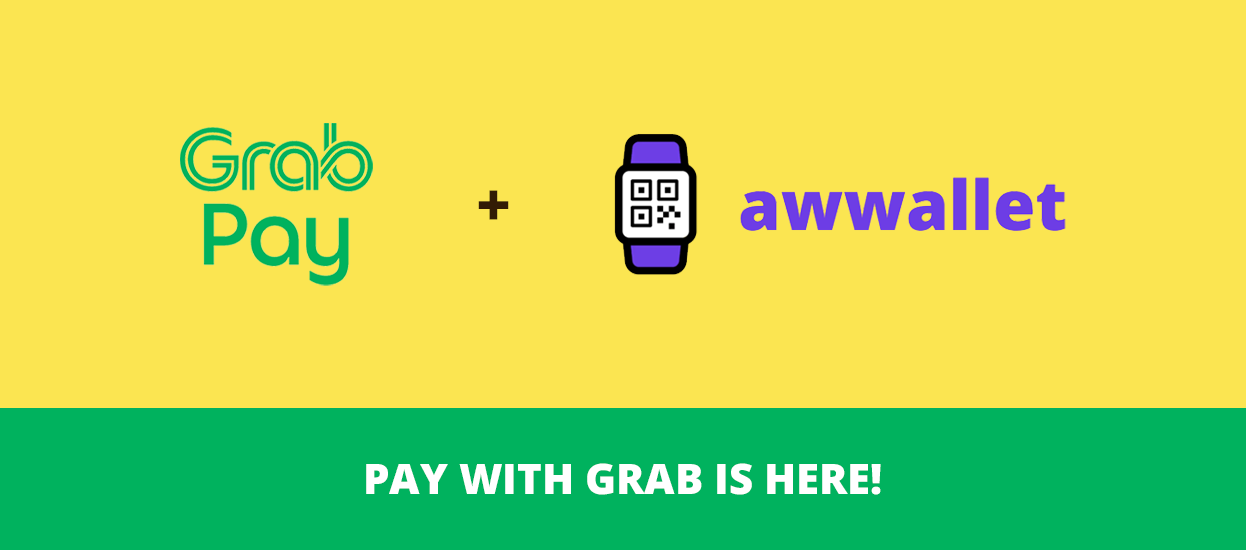
<style>
.page{position:relative;width:1246px;height:550px;background:#fbe551}
.page>*{position:absolute;margin:0}
.t1{font:59.5px "OpenSansRoman-ExtraBold";color:#321b05}
.t2{font:42px "OpenSansRoman-ExtraBold";color:#ffffff}
</style>
<div class="page">
<p class="t1" style="left:478px;top:190px;width:31px;height:30px">+</p>
<p class="t2" style="left:366px;top:463px;width:515px;height:32px">PAY WITH GRAB IS HERE!</p>
</div>
